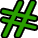
<style>
.page{position:relative;width:38px;height:38px;background:#ffffff}
.page>*{position:absolute;margin:0}
.t1{font:44px "CalifornianFB-Bold";color:#2aa000;font-weight:bold;scale:1.37 1}
</style>
<div class="page">
<p class="t1" style="left:1px;top:1px;width:36px;height:36px">#</p>
</div>
